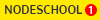
<style>
.page{position:relative;width:100px;height:20px;background:#ffea00}
.page>*{position:absolute;margin:0}
.t1{font:11px "Nunito-Bold";color:#333333}
.t2{font:11px "Nunito-Regular";color:#ffffff}
</style>
<div class="page">
<p class="t1" style="left:5px;top:5px;width:78px;height:9px">NODESCHOOL</p>
<p class="t1" style="left:5px;top:5px;width:78px;height:9px">NODESCHOOL</p>
<p class="t2" style="left:88px;top:6px;width:4px;height:8px">1</p>
</div>
